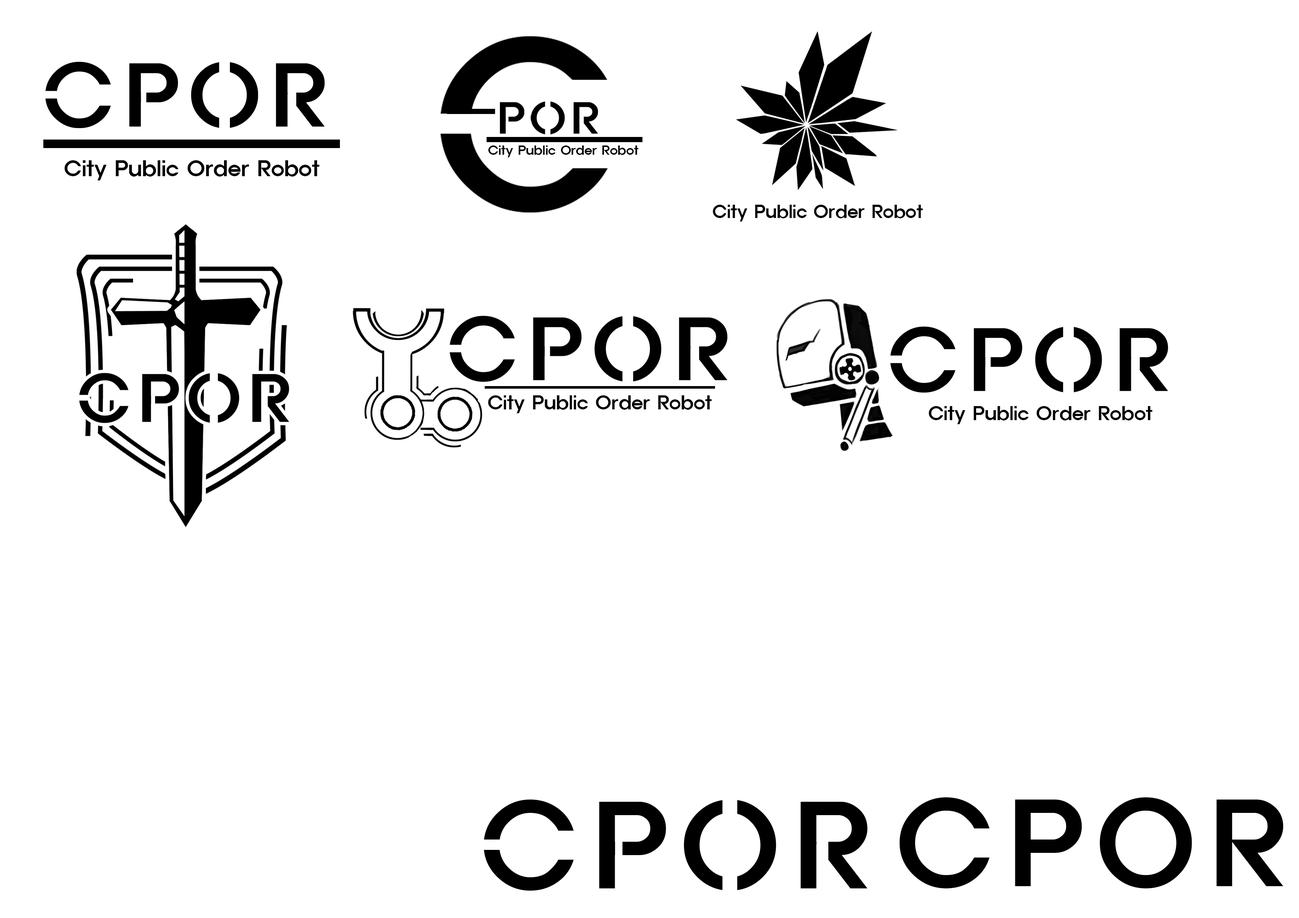
<style>
.page{position:relative;width:1299px;height:918px;background:#ffffff}
.page>*{position:absolute;margin:0}
.t1{font:12px "ExpoM-HM";color:#000000}
.t2{font:20.2px "ExpoM-HM";color:#000000}
.t3{font:16.9px "ExpoM-HM";color:#000000}
.t4{font:17.9px "ExpoM-HM";color:#000000}
.t5{font:111.1px "ExpoM-HM";color:#000000}
</style>
<div class="page">
<p class="t1" style="left:488px;top:145px;width:150px;height:12px">City Public Order Robot</p>
<p class="t2" style="left:64px;top:160px;width:256px;height:21px">City Public Order Robot</p>
<p class="t3" style="left:713px;top:205px;width:210px;height:17px">City Public Order Robot</p>
<p class="t4" style="left:488px;top:395px;width:224px;height:19px">City Public Order Robot</p>
<p class="t4" style="left:929px;top:406px;width:223px;height:18px">City Public Order Robot</p>
<p class="t5" style="left:899px;top:797px;width:91px;height:92px">C</p>
<p class="t5" style="left:1100px;top:797px;width:92px;height:92px">O</p>
<p class="t5" style="left:1015px;top:800px;width:67px;height:86px">P</p>
<p class="t5" style="left:1216px;top:800px;width:67px;height:86px">R</p>
</div>
